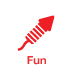
<style>
.page{position:relative;width:72px;height:72px;background:#ffffff}
.page>*{position:absolute;margin:0}
.t1{font:11px "HelveticaNeue-Bold";color:#eb3236}
</style>
<div class="page">
<p class="t1" style="left:27px;top:56px;width:19px;height:9px">Fun</p>
</div>
